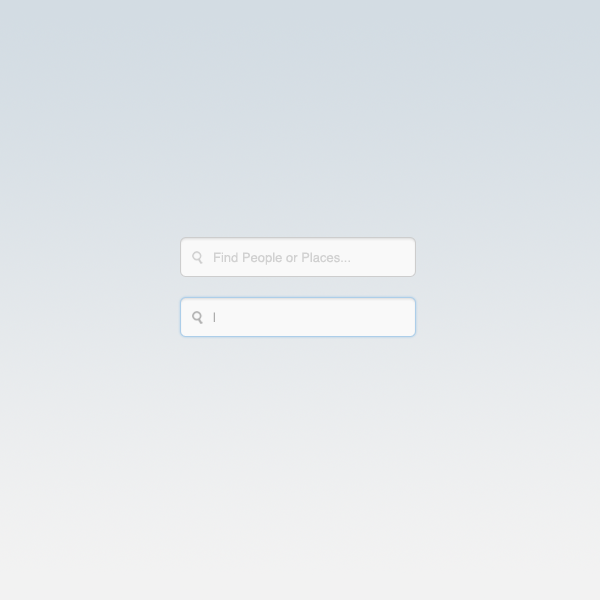
<style>
.page{position:relative;width:600px;height:600px}
.page>*{position:absolute;margin:0}
.t1{font:13px "Helvetica";color:#d1d1d1}
.t2{font:13px "Helvetica";color:#acacac}
</style>
<div class="page">
<p class="t1" style="left:214px;top:252px;width:136px;height:13px">Find People or Places...</p>
<p class="t2" style="left:213px;top:312px;width:2px;height:10px">|</p>
</div>
